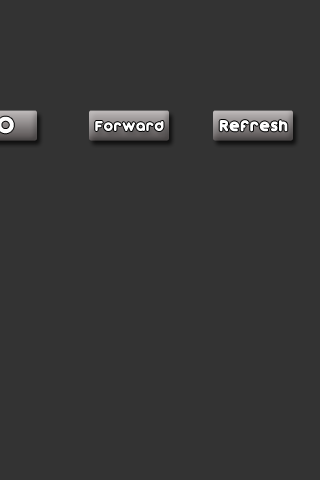
<style>
.page{position:relative;width:320px;height:480px;background:#333333}
.page>*{position:absolute;margin:0}
.t1{font:12.7px "Dunkin-Sans";color:#ffffff}
.t2{font:14.2px "Dunkin-Sans";color:#ffffff}
</style>
<div class="page">
<p class="t1" style="left:95px;top:121px;width:69px;height:10px">Forward</p>
<p class="t2" style="left:219px;top:120px;width:69px;height:12px">Refresh</p>
</div>
